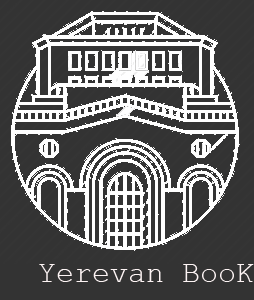
<style>
.page{position:relative;width:254px;height:300px;background:#333333}
.page>*{position:absolute;margin:0}
.t1{font:30px "CourierNewPSMT";color:#fdf4f4}
</style>
<div class="page">
<p class="t1" style="left:39px;top:264px;width:215px;height:18px">Yerevan BooK</p>
</div>
